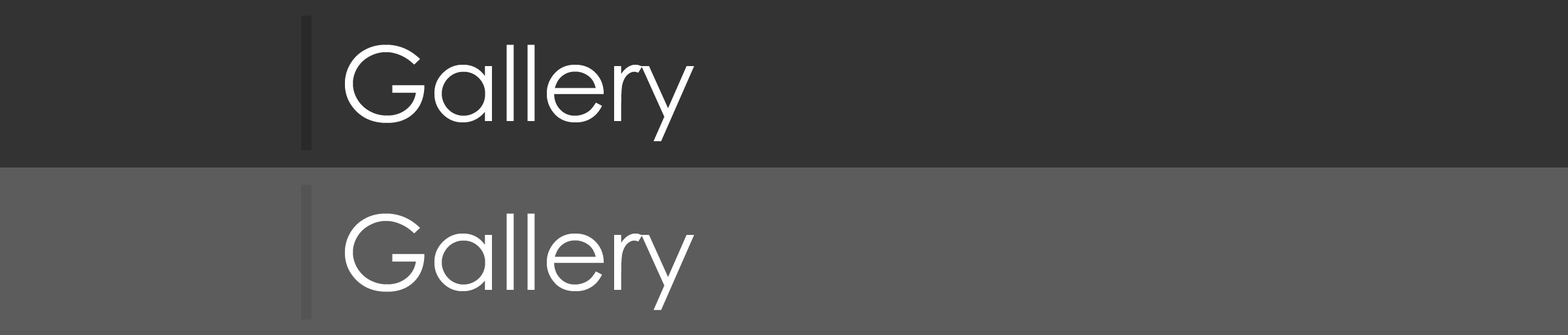
<style>
.page{position:relative;width:1568px;height:335px;background:#5c5c5c}
.page>*{position:absolute;margin:0}
.t1{font:103.5px "CenturyGothic";color:#ffffff}
</style>
<div class="page">
<p class="t1" style="left:344px;top:44px;width:350px;height:97px">Gallery</p>
<p class="t1" style="left:344px;top:213px;width:350px;height:97px">Gallery</p>
</div>
